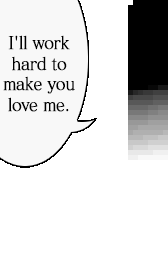
<style>
.page{position:relative;width:168px;height:256px;background:#ffffff}
.page>*{position:absolute;margin:0}
.t1{font:17.6px/20.5px "MatissePro-M";letter-spacing:-0.05em;color:#000000;font-weight:bold;scale:0.91 1}
</style>
<div class="page">
<p class="t1" style="left:3px;top:35px;width:72px;height:77px;text-align:center">I'll work<br>hard to<br>make you<br>love me.</p>
</div>
